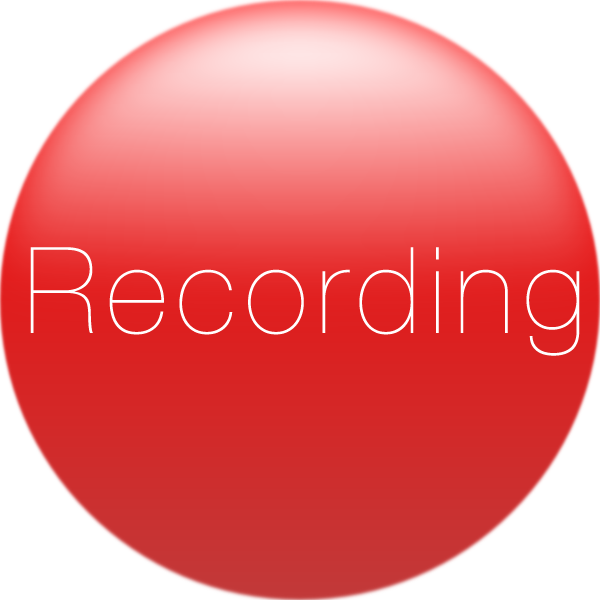
<style>
.page{position:relative;width:600px;height:600px;background:#ffffff}
.page>*{position:absolute;margin:0}
.t1{font:120px "HelveticaNeue-UltraLight";letter-spacing:0.075em;color:#ffffff}
</style>
<div class="page">
<p class="t1" style="left:30px;top:247px;width:550px;height:109px">Recording</p>
</div>
